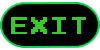
<style>
.page{position:relative;width:100px;height:50px;background:#000000}
.page>*{position:absolute;margin:0}
.t1{font:24px "JoystixMonospace-Regular";color:#34cb24}
</style>
<div class="page">
<p class="t1" style="left:11px;top:17px;width:75px;height:17px">EXIT</p>
</div>
